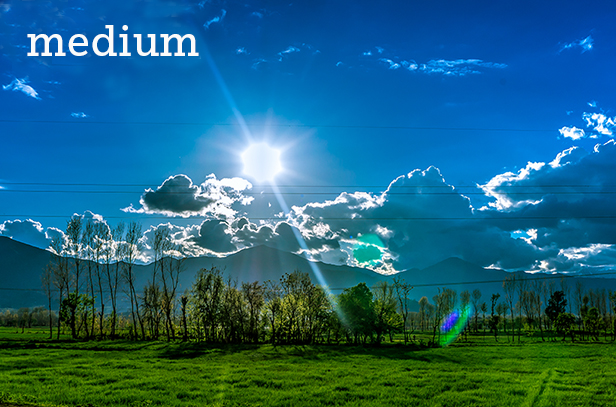
<style>
.page{position:relative;width:616px;height:407px}
.page>*{position:absolute;margin:0}
.t1{font:46.7px "EgyptianSlateStd-Regular";letter-spacing:0.025em;color:#fafbfa}
</style>
<div class="page">
<p class="t1" style="left:27px;top:25px;width:172px;height:31px">medium</p>
</div>
